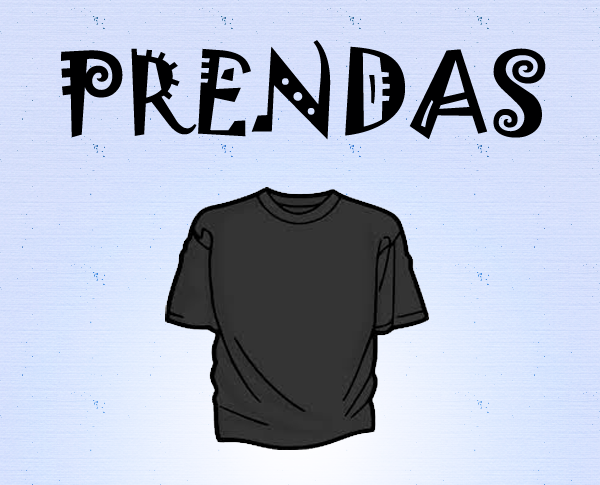
<style>
.page{position:relative;width:600px;height:485px}
.page>*{position:absolute;margin:0}
.t1{font:100px "Jokerman-Regular";color:#000001}
</style>
<div class="page">
<p class="t1" style="left:61px;top:40px;width:485px;height:100px">PRENDAS</p>
</div>
